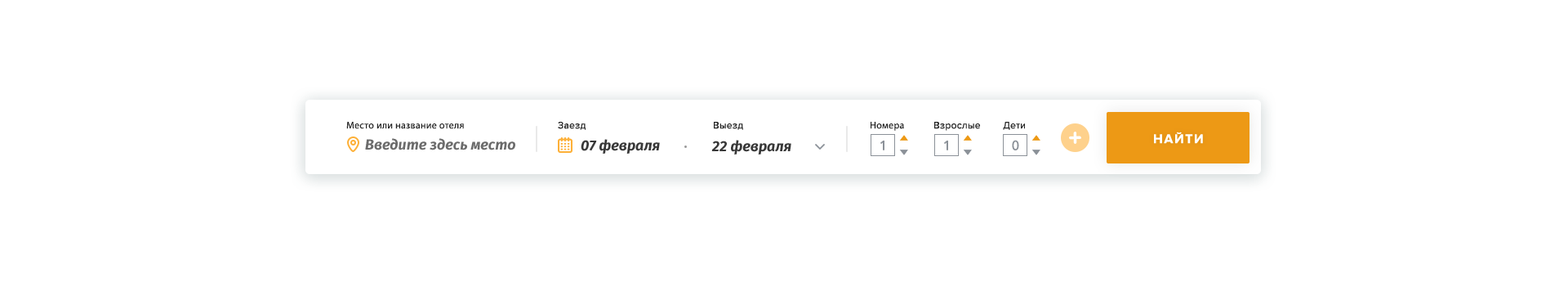
<style>
.page{position:relative;width:1568px;height:291px;background:#ffffff}
.page>*{position:absolute;margin:0}
.t1{font:9.8px "MyriadPro-Regular";letter-spacing:0.025em;color:#232323}
.t2{font:9.8px "ProximaNova-Regular";letter-spacing:0.025em;color:#232323}
.t3{font:13.1px "ProximaNova-Bold";letter-spacing:0.1em;color:#ffffff;text-transform:uppercase}
.t4{font:14.7px "FiraSans-BoldItalic";color:#6b6b6b}
.t5{font:14.7px "FiraSans-BoldItalic";color:#383838}
.t6{font:13.1px "AvenirNextCyr-Medium";letter-spacing:0.025em;color:#8b9198}
</style>
<div class="page">
<p class="t1" style="left:346px;top:122px;width:118px;height:7px">Место или название отеля</p>
<p class="t2" style="left:558px;top:122px;width:28px;height:8px">Заезд</p>
<p class="t2" style="left:714px;top:122px;width:29px;height:8px">Выезд</p>
<p class="t1" style="left:871px;top:122px;width:33px;height:9px">Номера</p>
<p class="t2" style="left:934px;top:122px;width:46px;height:9px">Взрослые</p>
<p class="t2" style="left:1003px;top:122px;width:22px;height:8px">Дети</p>
<p class="t3" style="left:1154px;top:131px;width:49px;height:13px">Найти</p>
<p class="t4" style="left:365px;top:138px;width:150px;height:12px">Введите здесь место</p>
<p class="t5" style="left:581px;top:139px;width:79px;height:15px">07 февраля</p>
<p class="t5" style="left:711px;top:140px;width:80px;height:14px">22 февраля</p>
<p class="t6" style="left:880px;top:140px;width:4px;height:10px">1</p>
<p class="t6" style="left:944px;top:140px;width:4px;height:10px">1</p>
<p class="t6" style="left:1012px;top:140px;width:7px;height:10px">0</p>
</div>
